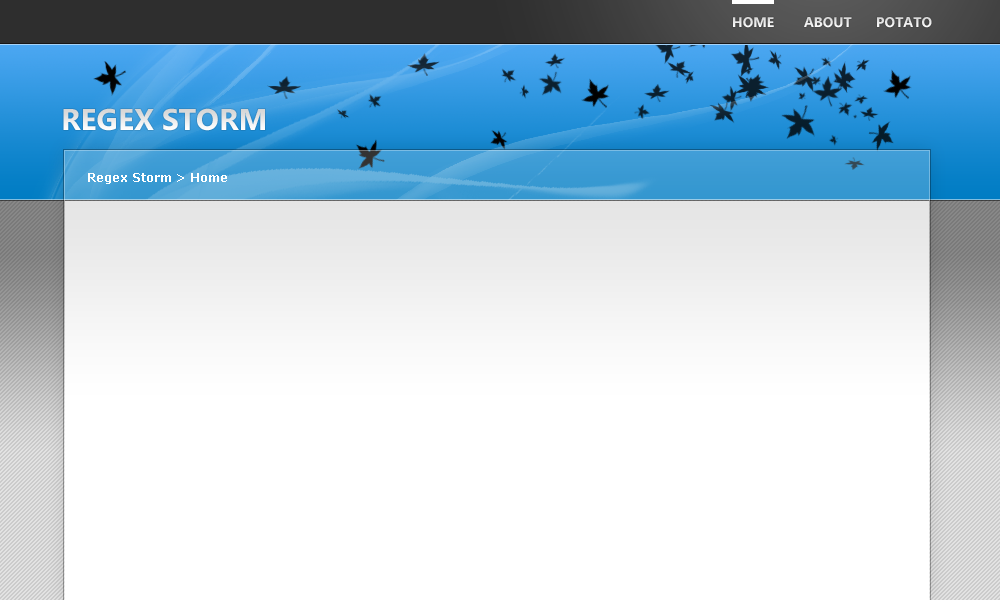
<style>
.page{position:relative;width:1000px;height:600px;background:#ffffff}
.page>*{position:absolute;margin:0}
.t1{font:14px "Ebrima-Bold";color:#eaeaea;text-transform:uppercase}
.t2{font:30px "Ebrima-Bold";color:#e9e9e9;text-transform:uppercase}
.t3{font:12px "Verdana-Bold";color:#ffffff}
</style>
<div class="page">
<p class="t1" style="left:733px;top:17px;width:199px;height:11px">Home About Potato</p>
<p class="t2" style="left:63px;top:108px;width:202px;height:23px">Regex Storm</p>
<p class="t3" style="left:88px;top:173px;width:139px;height:11px">Regex Storm &gt; Home</p>
</div>
